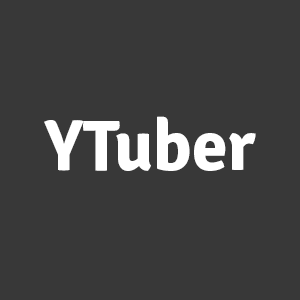
<style>
.page{position:relative;width:300px;height:300px;background:#383838}
.page>*{position:absolute;margin:0}
.t1{font:72.3px "Signika-Bold";color:#ffffff}
</style>
<div class="page">
<p class="t1" style="left:44px;top:116px;width:212px;height:55px">YTuber</p>
</div>
